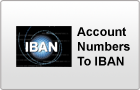
<style>
.page{position:relative;width:140px;height:90px}
.page>*{position:absolute;margin:0}
.t1{font:12.3px "Arial-BoldMT";color:#010101}
</style>
<div class="page">
<p class="t1" style="left:77px;top:27px;width:53px;height:39px">Account <br>Numbers<br>To IBAN</p>
</div>
